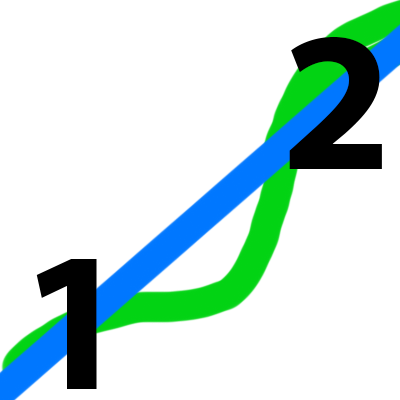
<style>
.page{position:relative;width:400px;height:400px;background:#ffffff}
.page>*{position:absolute;margin:0}
.t1{font:200px "MyriadPro-Bold";color:#000000}
</style>
<div class="page">
<p class="t1" style="left:289px;top:36px;width:93px;height:133px">2</p>
<p class="t1" style="left:36px;top:259px;width:61px;height:130px">1</p>
</div>
